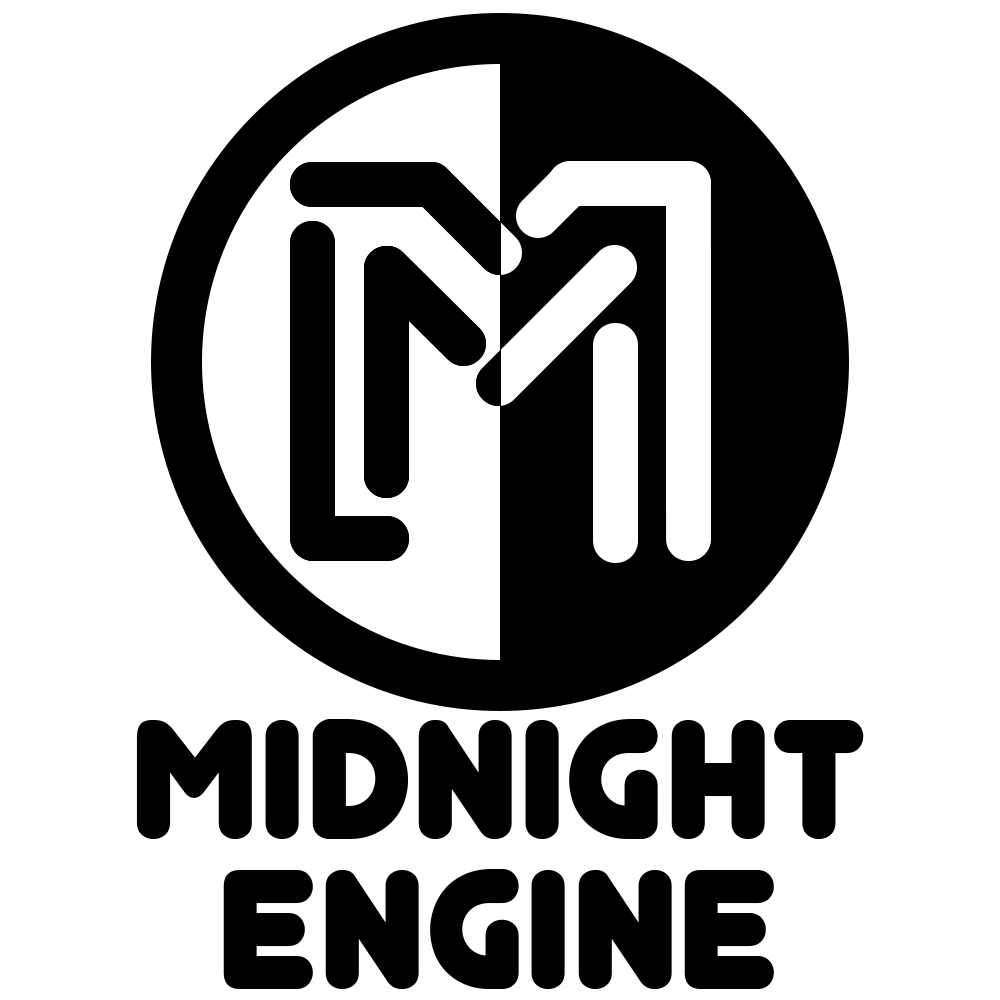
<style>
.page{position:relative;width:1000px;height:1000px;background:#ffffff}
.page>*{position:absolute;margin:0}
.t1{font:200px/150px "Junegull";color:#000000}
</style>
<div class="page">
<p class="t1" style="left:136px;top:719px;width:728px;height:270px;text-align:center">MIDNIGHT<br>ENGINE</p>
</div>
